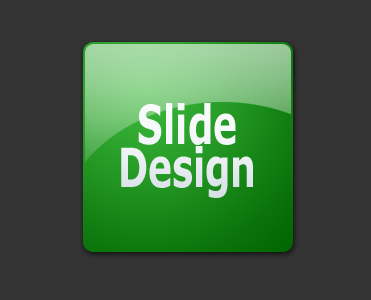
<style>
.page{position:relative;width:371px;height:300px;background:#333333}
.page>*{position:absolute;margin:0}
.t1{font:54px "Verdana-Bold";color:#f8fafc;scale:0.67 1}
</style>
<div class="page">
<p class="t1" style="left:121px;top:103px;width:132px;height:95px;text-align:center">Slide<br>Design</p>
</div>
